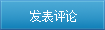
<style>
.page{position:relative;width:105px;height:30px}
.page>*{position:absolute;margin:0}
.t1{font:12px "SimSun";color:#ffffff}
</style>
<div class="page">
<p class="t1" style="left:30px;top:10px;width:47px;height:12px">发表评论</p>
</div>
